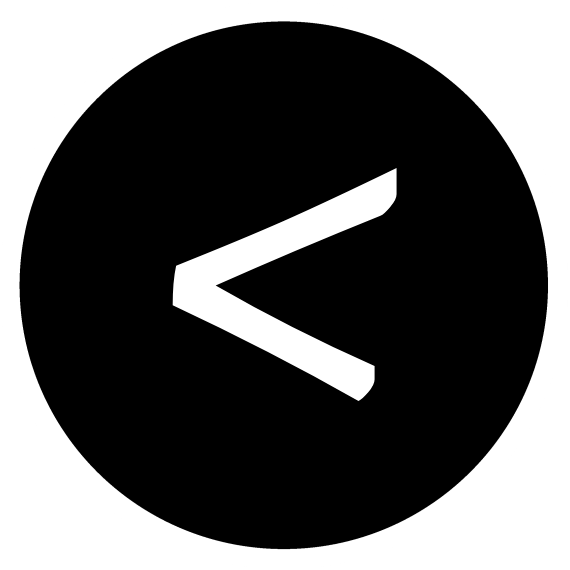
<style>
.page{position:relative;width:570px;height:570px;background:#000000}
.page>*{position:absolute;margin:0}
.t1{font:500px "EmblemaOne-Regular";color:#ffffff}
</style>
<div class="page">
<p class="t1" style="left:172px;top:168px;width:225px;height:234px">&lt;</p>
</div>
